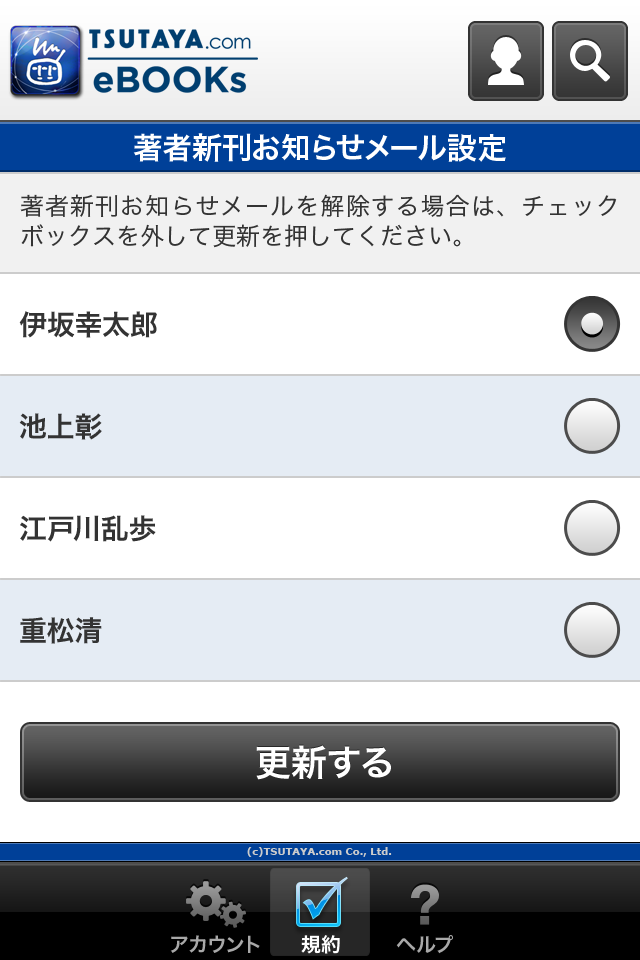
<style>
.page{position:relative;width:640px;height:960px;background:#ffffff}
.page>*{position:absolute;margin:0}
.t1{font:30px "HiraKakuPro-W6";color:#ffffff}
.t2{font:24px/30px "HiraKakuPro-W3";color:#333333}
.t3{font:28px "HiraKakuPro-W6";color:#333333}
.t4{font:36px "HiraKakuPro-W6";color:#ffffff}
.t5{font:10px "Verdana-Bold";color:#cccccc}
.t6{font:20px "HiraKakuPro-W6";color:#a8a8a8}
.t7{font:20px "HiraKakuPro-W6";color:#ffffff}
</style>
<div class="page">
<p class="t1" style="left:133px;top:133px;width:373px;height:29px">著者新刊お知らせメール設定</p>
<p class="t2" style="left:20px;top:194px;width:597px;height:54px;text-align:justify">著者新刊お知らせメールを解除する場合は、チェックボックスを外して更新を押してください。</p>
<p class="t3" style="left:19px;top:311px;width:138px;height:27px">伊坂幸太郎</p>
<p class="t3" style="left:19px;top:413px;width:83px;height:27px">池上彰</p>
<p class="t3" style="left:20px;top:515px;width:136px;height:27px">江戸川乱歩</p>
<p class="t3" style="left:20px;top:617px;width:82px;height:27px">重松清</p>
<p class="t4" style="left:256px;top:745px;width:135px;height:35px">更新する</p>
<p class="t5" style="left:247px;top:847px;width:145px;height:10px">(c)TSUTAYA.com Co., Ltd.</p>
<p class="t6" style="left:170px;top:935px;width:90px;height:18px">アカウント</p>
<p class="t7" style="left:301px;top:935px;width:39px;height:19px">規約</p>
<p class="t6" style="left:396px;top:935px;width:57px;height:19px">ヘルプ</p>
</div>
